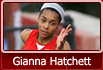
<style>
.page{position:relative;width:103px;height:70px}
.page>*{position:absolute;margin:0}
.t1{font:11px "Tahoma";color:#ffffff}
</style>
<div class="page">
<p class="t1" style="left:13px;top:56px;width:78px;height:10px">Gianna Hatchett</p>
</div>
